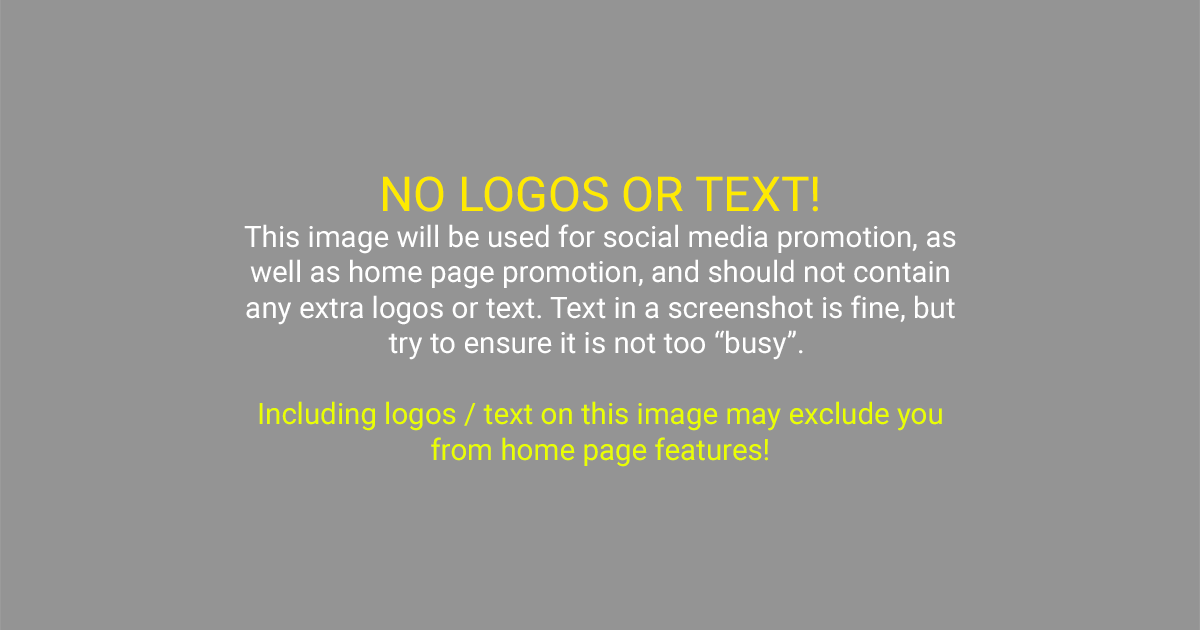
<style>
.page{position:relative;width:1200px;height:630px;background:#949494}
.page>*{position:absolute;margin:0}
.t1{font:29.5px "Roboto-Regular";color:#ffffff}
.t2{font:48px "Roboto-Regular";color:#ffea00}
.t3{font:29.5px "Roboto-Regular";color:#eaff00}
</style>
<div class="page">
<p class="t1" style="left:244px;top:176px;width:712px;height:291px;text-align:center"><span class="t2">NO LOGOS OR TEXT!<br></span>This image will be used for social media promotion, as<br>well as home page promotion, and should not contain<br>any extra logos or text. Text in a screenshot is fine, but<br>try to ensure it is not too “busy”. <br><span class="t3"><br>Including logos / text on this image may exclude you<br>from home page features!</span></p>
</div>
